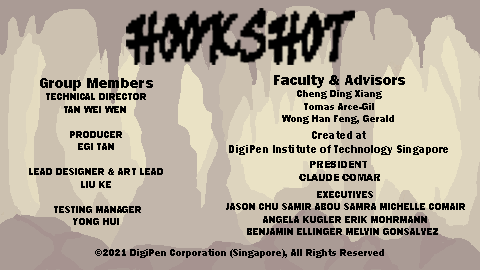
<style>
.page{position:relative;width:480px;height:270px}
.page>*{position:absolute;margin:0}
.t1{font:10.4px "FranklinGothic-Heavy";color:#000000}
.t2{font:14.6px "FranklinGothic-Heavy";color:#000000}
.t3{font:10.4px "ErasITC-Medium";color:#000000}
.t4{font:12px "FranklinGothic-Heavy";color:#000000;scale:0.94 1}
.t5{font:11.1px "FranklinGothic-Heavy";color:#000000}
.t6{font:41.7px "FranklinGothic-Heavy";color:#000000}
</style>
<div class="page">
<p class="t1" style="left:29px;top:78px;width:134px;height:147px;text-align:center"><span class="t2">Group Members<br></span>TECHNICAL DIRECTOR<br>TAN WEI WEN <br><br>PRODUCER<br>EGI TAN<br><br>LEAD DESIGNER &amp; ART LEAD<br>LIU KE<br><br> TESTING MANAGER<br>YONG HUI</p>
<p class="t1" style="left:274px;top:75px;width:131px;height:49px;text-align:center"><span class="t2">Faculty &amp; Advisors<br></span>Cheng Ding Xiang<br>Tomas Arce-Gil<br>Wong Han Feng, Gerald <br><span class="t3"></span></p>
<p class="t4" style="left:229px;top:131px;width:219px;height:24px;text-align:center">Created at<br>DigiPen Institute of Technology Singapore</p>
<p class="t5" style="left:299px;top:161px;width:81px;height:20px;text-align:center">PRESIDENT <br>CLAUDE COMAR</p>
<p class="t1" style="left:226px;top:191px;width:239px;height:44px;text-align:center">EXECUTIVES<br>JASON CHU SAMIR ABOU SAMRA MICHELLE COMAIR<br>ANGELA KUGLER ERIK MOHRMANN<br>BENJAMIN ELLINGER MELVIN GONSALVEZ  <br><br> <br><span class="t3"></span></p>
<p class="t1" style="left:95px;top:249px;width:289px;height:9px"><span class="t6"> </span>©2021 DigiPen Corporation (Singapore), All Rights Reserved</p>
</div>
